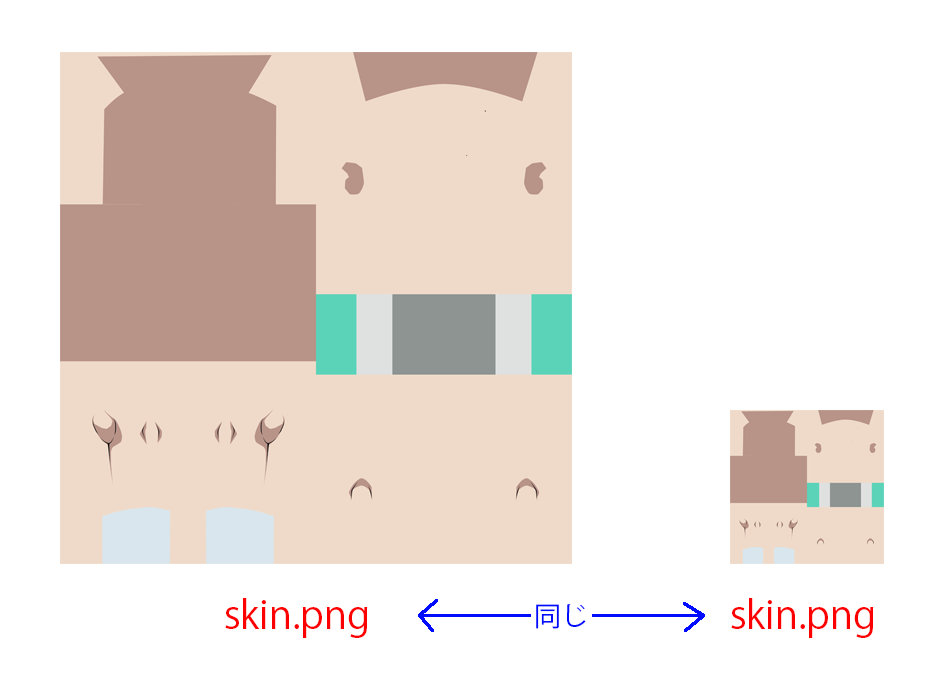
<style>
.page{position:relative;width:952px;height:678px;background:#ffffff}
.page>*{position:absolute;margin:0}
.t1{font:38.6px "KozGoPr6N-Regular";color:#ff0000}
.t2{font:27.1px "KozGoPr6N-Regular";color:#000cff}
</style>
<div class="page">
<p class="t1" style="left:225px;top:598px;width:143px;height:40px">skin.png</p>
<p class="t2" style="left:536px;top:604px;width:50px;height:25px">同じ</p>
<p class="t1" style="left:731px;top:598px;width:143px;height:40px">skin.png</p>
</div>
